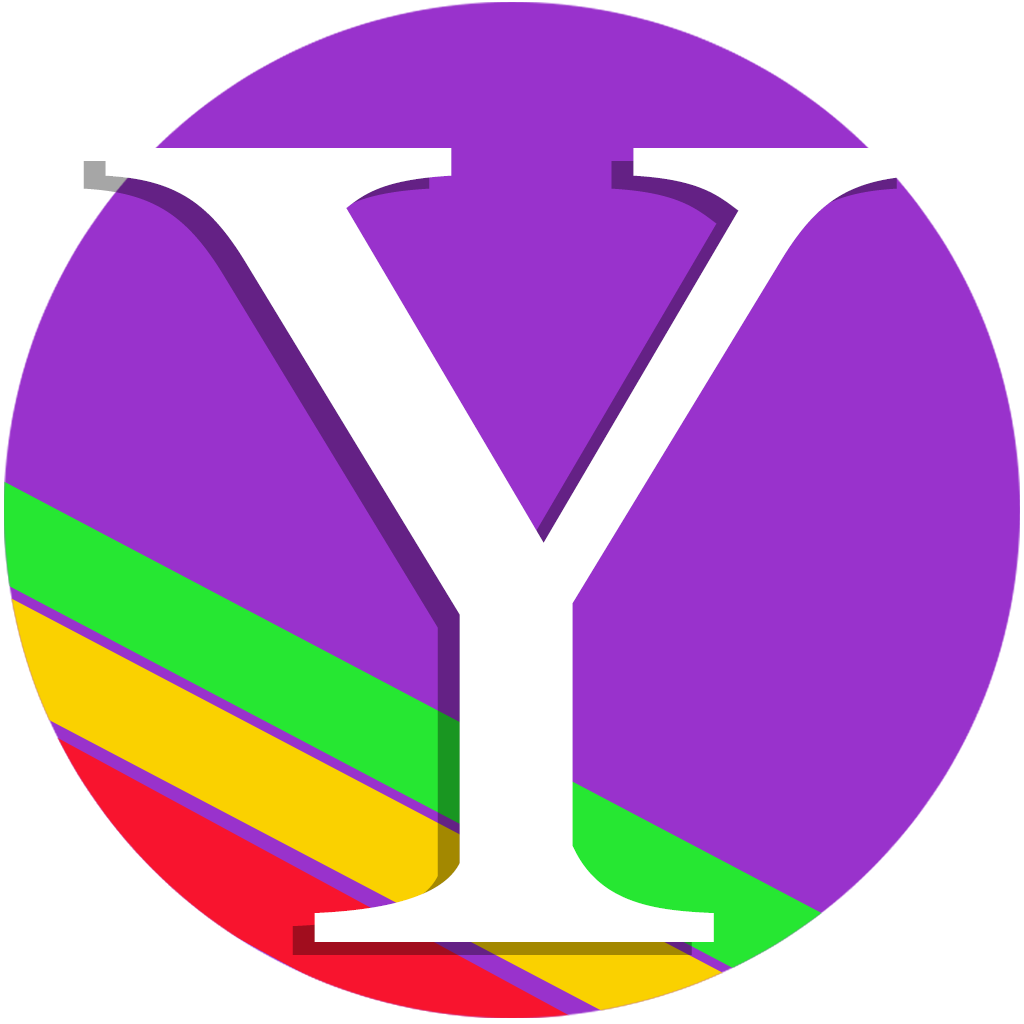
<style>
.page{position:relative;width:1024px;height:1024px;background:#9932cc}
.page>*{position:absolute;margin:0}
.t1{font:1250.4px "YaleNew-Roman";color:#ffffff}
</style>
<div class="page">
<p class="t1" style="left:105px;top:148px;width:814px;height:794px">Y</p>
</div>
